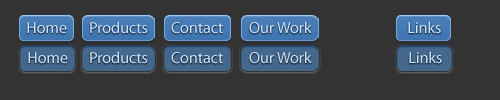
<style>
.page{position:relative;width:500px;height:100px;background:#333333}
.page>*{position:absolute;margin:0}
.t1{font:16px "MyriadPro-Regular";color:#caebff}
</style>
<div class="page">
<p class="t1" style="left:27px;top:22px;width:40px;height:12px">Home</p>
<p class="t1" style="left:90px;top:21px;width:58px;height:13px">Products</p>
<p class="t1" style="left:171px;top:22px;width:52px;height:12px">Contact</p>
<p class="t1" style="left:249px;top:21px;width:63px;height:13px">Our Work</p>
<p class="t1" style="left:408px;top:21px;width:33px;height:13px">Links</p>
<p class="t1" style="left:28px;top:52px;width:40px;height:12px">Home</p>
<p class="t1" style="left:90px;top:51px;width:58px;height:13px">Products</p>
<p class="t1" style="left:171px;top:52px;width:52px;height:12px">Contact</p>
<p class="t1" style="left:249px;top:51px;width:63px;height:13px">Our Work</p>
<p class="t1" style="left:409px;top:51px;width:33px;height:13px">Links</p>
</div>
